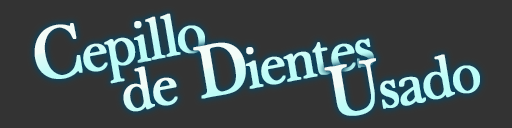
<style>
.page{position:relative;width:512px;height:128px;background:#333333}
.page>*{position:absolute;margin:0}
.t1{font:66.2px "BaskervilleLight";letter-spacing:-0.06em;color:#c4fcf8;font-weight:bold;scale:0.94 1}
.t2{font:86.8px "BaskervilleLight";letter-spacing:-0.06em;color:#c4fcf8;font-weight:bold;scale:0.94 1}
.t3{font:66.2px "BaskervilleLight";letter-spacing:-0.06em;font-weight:bold;scale:0.94 1}
.t4{font:86.8px "BaskervilleLight";letter-spacing:-0.06em;font-weight:bold;scale:0.94 1}
.t5{font:66.2px "BaskervilleLight";letter-spacing:-0.06em;color:#c0fcf8;font-weight:bold;scale:0.94 1}
.t6{font:86.8px "BaskervilleLight";letter-spacing:-0.06em;color:#c0fcf8;font-weight:bold;scale:0.94 1}
</style>
<div class="page">
<p class="t1" style="left:34px;top:13px;width:171px;height:71px;rotate:-11deg"><span class="t2">C</span>epillo</p>
<p class="t3" style="left:123px;top:38px;width:251px;height:74px;rotate:-11deg">de <span class="t4">D</span>ientes</p>
<p class="t5" style="left:324px;top:54px;width:156px;height:62px;rotate:-11deg"><span class="t6">U</span>sado</p>
</div>
